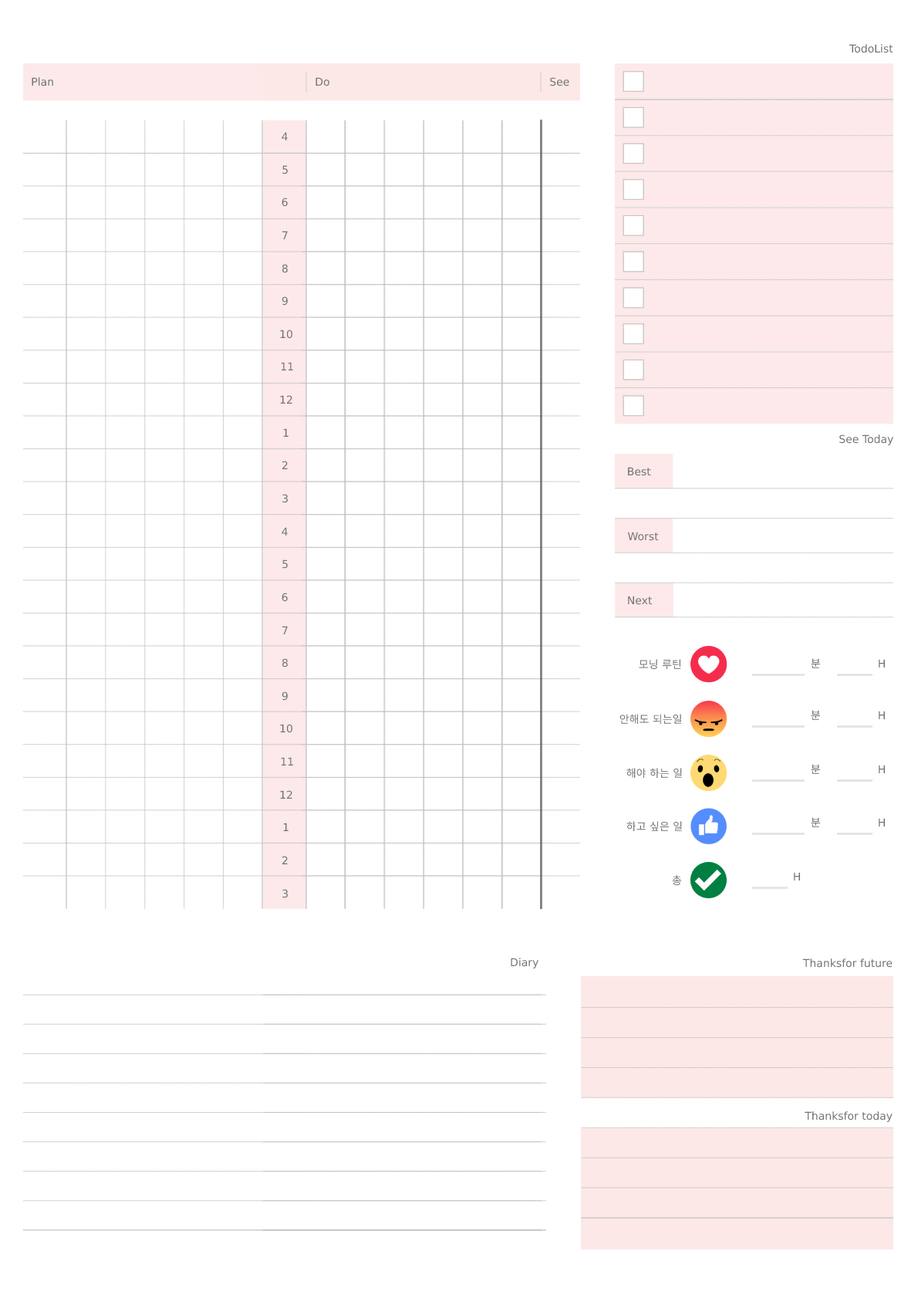
<style>
.page{position:relative;width:918px;height:1298px;background:#ffffff}
.page>*{position:absolute;margin:0}
.t1{font:10.8px "Helvetica";color:#757575}
</style>
<div class="page">
<p class="t1" style="left:849px;top:44px;width:45px;height:9px">TodoList</p>
<p class="t1" style="left:32px;top:77px;width:21px;height:9px">Plan</p>
<p class="t1" style="left:316px;top:77px;width:14px;height:9px">Do</p>
<p class="t1" style="left:550px;top:77px;width:20px;height:9px">See</p>
<p class="t1" style="left:282px;top:132px;width:6px;height:8px">4</p>
<p class="t1" style="left:282px;top:165px;width:6px;height:9px">5</p>
<p class="t1" style="left:282px;top:198px;width:6px;height:9px">6</p>
<p class="t1" style="left:282px;top:231px;width:6px;height:8px">7</p>
<p class="t1" style="left:282px;top:264px;width:6px;height:9px">8</p>
<p class="t1" style="left:282px;top:296px;width:6px;height:10px">9</p>
<p class="t1" style="left:280px;top:330px;width:13px;height:9px">10</p>
<p class="t1" style="left:281px;top:362px;width:12px;height:8px">11</p>
<p class="t1" style="left:280px;top:395px;width:13px;height:9px">12</p>
<p class="t1" style="left:283px;top:428px;width:6px;height:9px">1</p>
<p class="t1" style="left:840px;top:435px;width:54px;height:10px">See Today</p>
<p class="t1" style="left:282px;top:461px;width:6px;height:8px">2</p>
<p class="t1" style="left:628px;top:467px;width:23px;height:9px">Best</p>
<p class="t1" style="left:282px;top:494px;width:6px;height:9px">3</p>
<p class="t1" style="left:282px;top:527px;width:6px;height:9px">4</p>
<p class="t1" style="left:628px;top:532px;width:31px;height:9px">Worst</p>
<p class="t1" style="left:282px;top:560px;width:6px;height:9px">5</p>
<p class="t1" style="left:282px;top:593px;width:6px;height:9px">6</p>
<p class="t1" style="left:628px;top:596px;width:25px;height:9px">Next</p>
<p class="t1" style="left:282px;top:626px;width:6px;height:8px">7</p>
<p class="t1" style="left:282px;top:658px;width:6px;height:10px">8</p>
<p class="t1" style="left:639px;top:659px;width:43px;height:11px">모닝 루틴</p>
<p class="t1" style="left:811px;top:658px;width:9px;height:10px">분</p>
<p class="t1" style="left:879px;top:659px;width:6px;height:9px">H</p>
<p class="t1" style="left:282px;top:692px;width:6px;height:9px">9</p>
<p class="t1" style="left:620px;top:714px;width:62px;height:11px">안해도 되는일</p>
<p class="t1" style="left:811px;top:710px;width:9px;height:10px">분</p>
<p class="t1" style="left:879px;top:711px;width:6px;height:8px">H</p>
<p class="t1" style="left:280px;top:724px;width:13px;height:9px">10</p>
<p class="t1" style="left:281px;top:757px;width:12px;height:9px">11</p>
<p class="t1" style="left:627px;top:768px;width:55px;height:11px">해야 하는 일</p>
<p class="t1" style="left:811px;top:764px;width:9px;height:10px">분</p>
<p class="t1" style="left:879px;top:765px;width:6px;height:8px">H</p>
<p class="t1" style="left:280px;top:790px;width:13px;height:9px">12</p>
<p class="t1" style="left:627px;top:821px;width:55px;height:11px">하고 싶은 일</p>
<p class="t1" style="left:811px;top:817px;width:9px;height:10px">분</p>
<p class="t1" style="left:879px;top:818px;width:6px;height:9px">H</p>
<p class="t1" style="left:283px;top:823px;width:6px;height:8px">1</p>
<p class="t1" style="left:282px;top:856px;width:6px;height:8px">2</p>
<p class="t1" style="left:672px;top:875px;width:10px;height:11px">총</p>
<p class="t1" style="left:794px;top:872px;width:6px;height:9px">H</p>
<p class="t1" style="left:282px;top:889px;width:6px;height:9px">3</p>
<p class="t1" style="left:511px;top:958px;width:28px;height:11px">Diary</p>
<p class="t1" style="left:803px;top:959px;width:90px;height:9px">Thanksfor future</p>
<p class="t1" style="left:805px;top:1111px;width:88px;height:11px">Thanksfor today</p>
</div>
